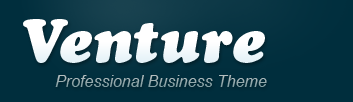
<style>
.page{position:relative;width:353px;height:102px;background:#002e3d}
.page>*{position:absolute;margin:0}
.t1{font:60.4px "CooperBlackStd-Italic";color:#ffffff}
.t2{font:60.4px "CooperBlackStd-Italic";letter-spacing:-0.1em;color:#ffffff}
.t3{font:16px "Arial-ItalicMT";color:#9aacaf}
</style>
<div class="page">
<p class="t1" style="left:23px;top:19px;width:242px;height:44px"><span class="t2">V</span>enture</p>
<p class="t3" style="left:55px;top:75px;width:212px;height:12px">Professional Business Theme</p>
</div>
